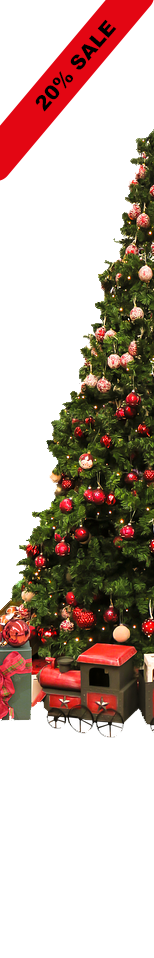
<style>
.page{position:relative;width:154px;height:958px;background:#ffffff}
.page>*{position:absolute;margin:0}
.t1{font:20px "Arial-Black";color:#000000}
</style>
<div class="page">
<p class="t1" style="left:35px;top:19px;width:82px;height:93px;rotate:-49deg">20% SALE</p>
</div>
